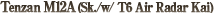
<style>
.page{position:relative;width:214px;height:13px;background:#ffffff}
.page>*{position:absolute;margin:0}
.t1{font:14px "RyuminPro-ExBold";letter-spacing:-0.08em;color:#4a3f32;font-weight:bold;scale:0.9 1}
.t2{font:13px "RyuminPro-ExBold";letter-spacing:-0.08em;color:#4a3f32;font-weight:bold;scale:0.9 1}
</style>
<div class="page">
<p class="t1" style="left:0px;top:1px;width:77px;height:12px">Tenzan M12A</p>
<p class="t2" style="left:78px;top:2px;width:136px;height:13px">(Sk./w/ T6 Air Radar Kai)</p>
</div>
